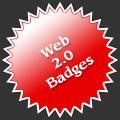
<style>
.page{position:relative;width:120px;height:120px;background:#333333}
.page>*{position:absolute;margin:0}
.t1{font:14.2px/14.2px "Sling-Bold";color:#ffffff}
</style>
<div class="page">
<p class="t1" style="left:39px;top:36px;width:55px;height:53px;text-align:center;rotate:-31deg">Web<br>2.0<br>Badges</p>
</div>
